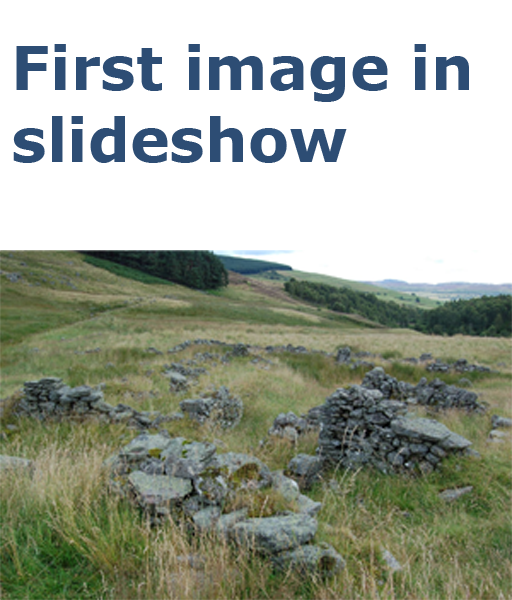
<style>
.page{position:relative;width:512px;height:600px;background:#ffffff}
.page>*{position:absolute;margin:0}
.t1{font:60px "Verdana-Bold";color:#2d4d74}
</style>
<div class="page">
<p class="t1" style="left:13px;top:44px;width:456px;height:119px">First image in<br>slideshow</p>
</div>
